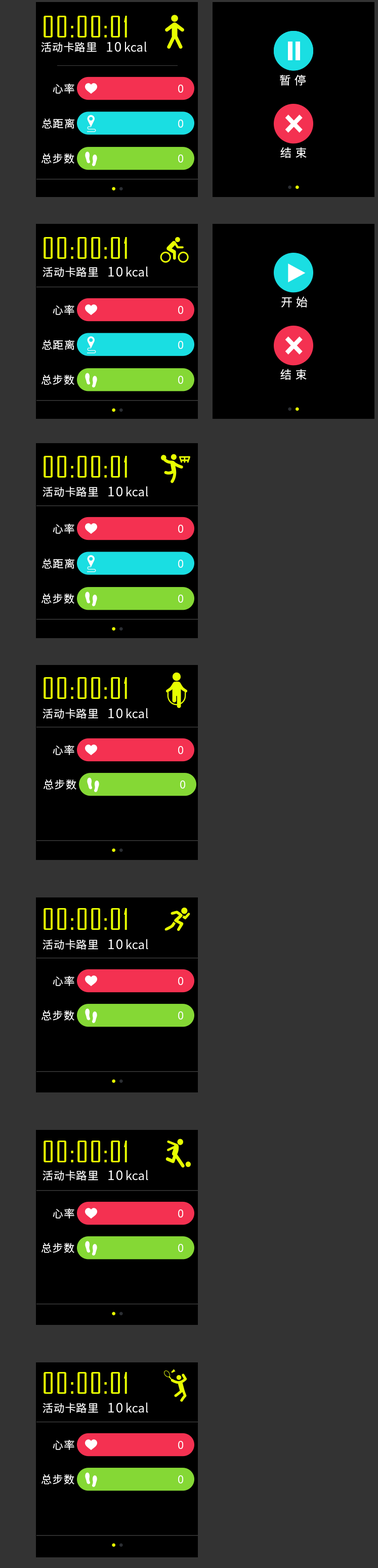
<style>
.page{position:relative;width:378px;height:1568px;background:#333333}
.page>*{position:absolute;margin:0}
.t1{font:28.3px "AgencyFB-Reg";letter-spacing:0.05em;color:#e7ff00}
.t2{font:10.8px "NotoSansHans-DemiLight";letter-spacing:0.05em;color:#ffffff}
.t3{font:12.2px "NotoSansHans-DemiLight";color:#ffffff}
.t4{font:13.2px "NotoSansHans-DemiLight";letter-spacing:0.1em;color:#ffffff;text-transform:uppercase}
.t5{font:11.5px "NotoSansHans-DemiLight";letter-spacing:0.05em;color:#ffffff}
</style>
<div class="page">
<p class="t1" style="left:44px;top:16px;width:83px;height:21px">00:00:01</p>
<p class="t2" style="left:41px;top:42px;width:56px;height:10px">活动卡路里</p>
<p class="t3" style="left:125px;top:42px;width:22px;height:10px">kcal</p>
<p class="t4" style="left:107px;top:42px;width:14px;height:10px">10</p>
<p class="t5" style="left:280px;top:74px;width:26px;height:12px">暂 停</p>
<p class="t2" style="left:53px;top:84px;width:21px;height:10px">心率</p>
<p class="t2" style="left:178px;top:85px;width:5px;height:8px">0</p>
<p class="t2" style="left:42px;top:119px;width:32px;height:10px">总距离</p>
<p class="t2" style="left:178px;top:120px;width:5px;height:8px">0</p>
<p class="t5" style="left:281px;top:147px;width:26px;height:11px">结 束</p>
<p class="t2" style="left:42px;top:153px;width:32px;height:11px">总步数</p>
<p class="t2" style="left:178px;top:154px;width:5px;height:9px">0</p>
<p class="t1" style="left:44px;top:237px;width:83px;height:22px">00:00:01</p>
<p class="t2" style="left:43px;top:266px;width:55px;height:11px">活动卡路里</p>
<p class="t4" style="left:108px;top:267px;width:15px;height:10px">10</p>
<p class="t3" style="left:127px;top:266px;width:21px;height:11px">kcal</p>
<p class="t2" style="left:53px;top:305px;width:21px;height:10px">心率</p>
<p class="t2" style="left:178px;top:306px;width:5px;height:8px">0</p>
<p class="t5" style="left:282px;top:296px;width:26px;height:11px">开 始</p>
<p class="t2" style="left:42px;top:340px;width:32px;height:10px">总距离</p>
<p class="t2" style="left:178px;top:341px;width:5px;height:8px">0</p>
<p class="t2" style="left:42px;top:375px;width:32px;height:10px">总步数</p>
<p class="t2" style="left:178px;top:376px;width:5px;height:8px">0</p>
<p class="t5" style="left:281px;top:369px;width:26px;height:11px">结 束</p>
<p class="t1" style="left:44px;top:456px;width:83px;height:22px">00:00:01</p>
<p class="t2" style="left:43px;top:486px;width:55px;height:11px">活动卡路里</p>
<p class="t4" style="left:108px;top:487px;width:15px;height:9px">10</p>
<p class="t3" style="left:127px;top:486px;width:21px;height:10px">kcal</p>
<p class="t2" style="left:53px;top:524px;width:21px;height:10px">心率</p>
<p class="t2" style="left:178px;top:525px;width:5px;height:8px">0</p>
<p class="t2" style="left:42px;top:559px;width:32px;height:10px">总距离</p>
<p class="t2" style="left:178px;top:560px;width:5px;height:8px">0</p>
<p class="t2" style="left:42px;top:594px;width:32px;height:10px">总步数</p>
<p class="t2" style="left:178px;top:595px;width:5px;height:8px">0</p>
<p class="t1" style="left:44px;top:677px;width:83px;height:22px">00:00:01</p>
<p class="t2" style="left:43px;top:708px;width:55px;height:11px">活动卡路里</p>
<p class="t4" style="left:108px;top:709px;width:15px;height:9px">10</p>
<p class="t3" style="left:127px;top:708px;width:21px;height:10px">kcal</p>
<p class="t2" style="left:53px;top:745px;width:21px;height:10px">心率</p>
<p class="t2" style="left:178px;top:746px;width:5px;height:8px">0</p>
<p class="t2" style="left:44px;top:779px;width:32px;height:11px">总步数</p>
<p class="t2" style="left:180px;top:780px;width:5px;height:9px">0</p>
<p class="t1" style="left:44px;top:908px;width:83px;height:22px">00:00:01</p>
<p class="t2" style="left:43px;top:939px;width:55px;height:11px">活动卡路里</p>
<p class="t4" style="left:108px;top:939px;width:15px;height:10px">10</p>
<p class="t3" style="left:127px;top:939px;width:21px;height:10px">kcal</p>
<p class="t2" style="left:53px;top:976px;width:21px;height:10px">心率</p>
<p class="t2" style="left:178px;top:977px;width:5px;height:8px">0</p>
<p class="t2" style="left:42px;top:1010px;width:32px;height:11px">总步数</p>
<p class="t2" style="left:178px;top:1011px;width:5px;height:9px">0</p>
<p class="t1" style="left:44px;top:1141px;width:83px;height:21px">00:00:01</p>
<p class="t2" style="left:43px;top:1170px;width:55px;height:11px">活动卡路里</p>
<p class="t3" style="left:127px;top:1170px;width:21px;height:10px">kcal</p>
<p class="t4" style="left:108px;top:1170px;width:15px;height:10px">10</p>
<p class="t2" style="left:53px;top:1208px;width:21px;height:11px">心率</p>
<p class="t2" style="left:178px;top:1209px;width:5px;height:9px">0</p>
<p class="t2" style="left:42px;top:1243px;width:32px;height:10px">总步数</p>
<p class="t2" style="left:178px;top:1244px;width:5px;height:8px">0</p>
<p class="t1" style="left:44px;top:1372px;width:83px;height:22px">00:00:01</p>
<p class="t2" style="left:43px;top:1402px;width:55px;height:11px">活动卡路里</p>
<p class="t4" style="left:108px;top:1403px;width:15px;height:10px">10</p>
<p class="t3" style="left:127px;top:1402px;width:21px;height:11px">kcal</p>
<p class="t2" style="left:53px;top:1440px;width:21px;height:10px">心率</p>
<p class="t2" style="left:178px;top:1441px;width:5px;height:8px">0</p>
<p class="t2" style="left:42px;top:1474px;width:32px;height:10px">总步数</p>
<p class="t2" style="left:178px;top:1475px;width:5px;height:8px">0</p>
</div>
